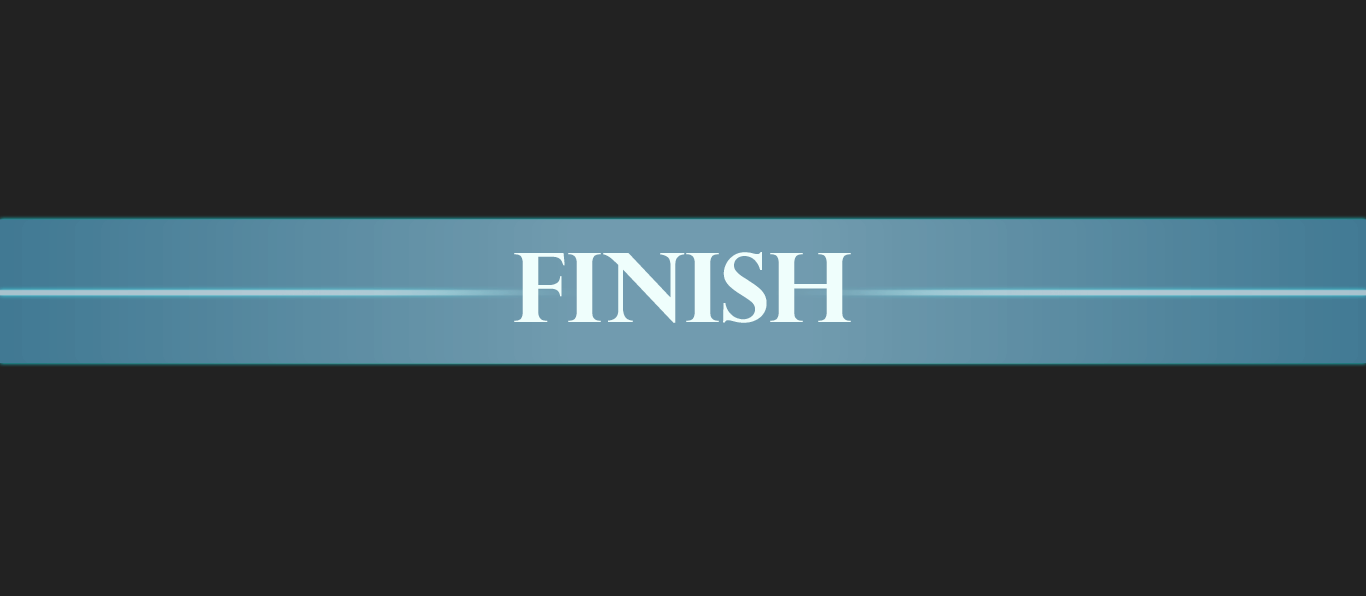
<style>
.page{position:relative;width:1366px;height:596px;background:#222222}
.page>*{position:absolute;margin:0}
.t1{font:96px "PerpetuaTitlingMT-Bold";color:#effefc}
</style>
<div class="page">
<p class="t1" style="left:514px;top:252px;width:337px;height:71px">FINISH</p>
</div>
